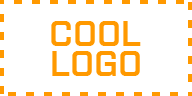
<style>
.page{position:relative;width:192px;height:96px;background:#ffffff}
.page>*{position:absolute;margin:0}
.t1{font:36px "Purista-SemiBold";color:#ff9900;text-transform:uppercase}
</style>
<div class="page">
<p class="t1" style="left:51px;top:21px;width:90px;height:25px">COOL</p>
<p class="t1" style="left:52px;top:51px;width:88px;height:25px">LOGO</p>
</div>
